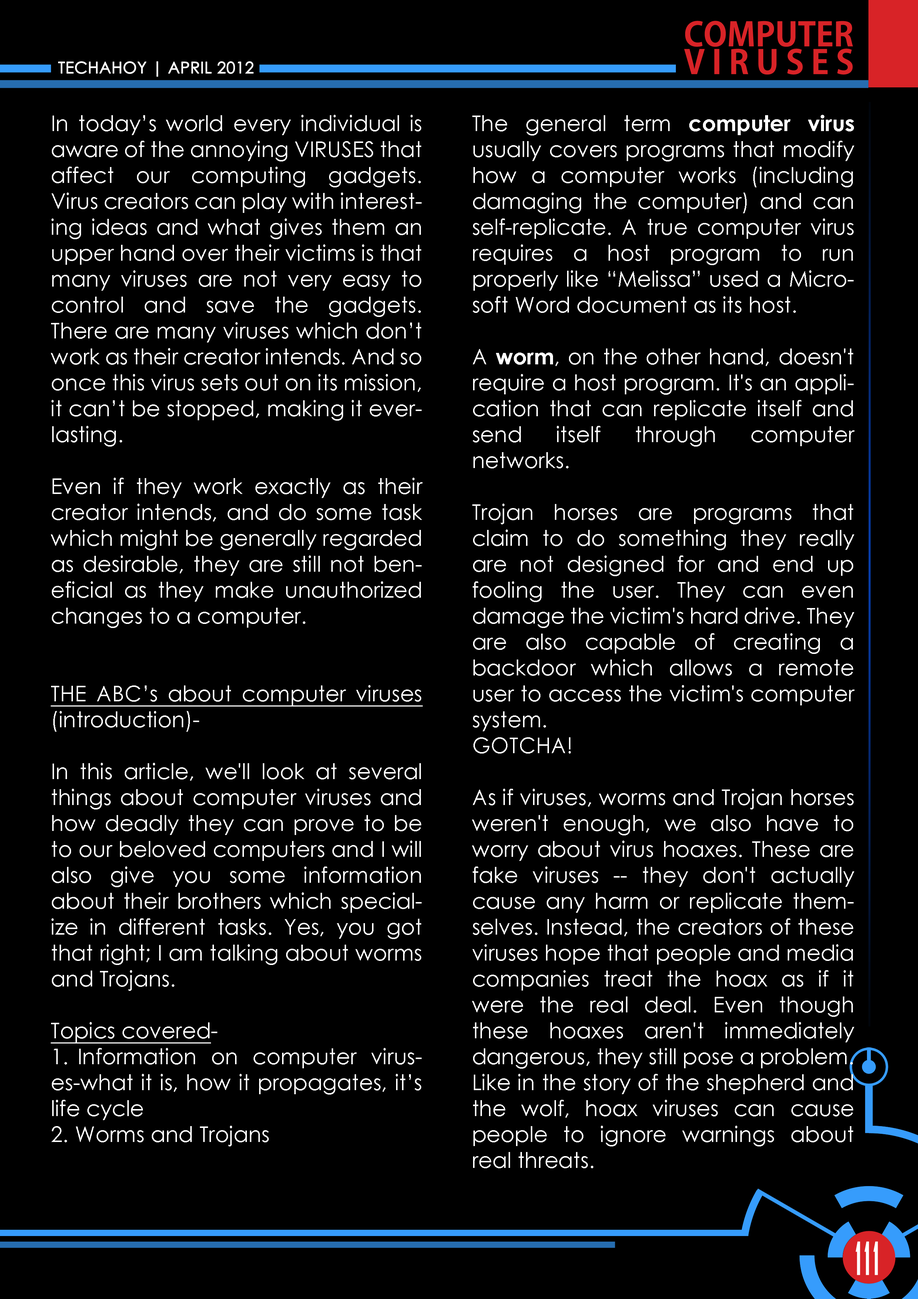
<style>
.page{position:relative;width:918px;height:1299px;background:#000000}
.page>*{position:absolute;margin:0}
.t1{font:32.6px/27.8px "AdobeGothicStd-Bold";color:#d82327;text-transform:uppercase}
.t2{font:32.6px/27.8px "AdobeGothicStd-Bold";letter-spacing:0.22em;color:#d82327;text-transform:uppercase}
.t3{font:16px "CenturyGothic";color:#ffffff;text-transform:uppercase;font-weight:bold}
.t4{font:21.6px "CenturyGothic";color:#ffffff}
.t5{font:21.6px "CenturyGothic";color:#ffffff;text-decoration:underline}
.t6{font:21.6px "CenturyGothic-Bold";color:#ffffff}
.t7{font:43.7px "AgencyFB-Reg";color:#ffffff;text-transform:uppercase}
</style>
<div class="page">
<p class="t1" style="left:684px;top:21px;width:169px;height:54px">Computer <br><span class="t2">Viruses</span></p>
<p class="t3" style="left:58px;top:61px;width:196px;height:16px">techahoy | APRIL 2012</p>
<p class="t4" style="left:51px;top:115px;width:372px;height:1031px;text-align:justify">In today’s world every individual is aware of the annoying VIRUSES that affect our computing gadgets. Virus creators can play with interesting ideas and what gives them an upper hand over their victims is that many viruses are not very easy to control and save the gadgets. There are many viruses which don’t work as their creator intends. And so once this virus sets out on its mission, it can’t be stopped, making it everlasting. <br><br>Even if they work exactly as their creator intends, and do some task which might be generally regarded as desirable, they are still not beneficial as they make unauthorized changes to a computer.<br><br><br><span class="t5">THE ABC’s about computer viruses </span>(introduction)-<br><br>In this article, we'll look at several things about computer viruses and how deadly they can prove to be to our beloved computers and I will also give you some information about their brothers which specialize in different tasks. Yes, you got that right; I am talking about worms and Trojans.<br><br><span class="t5">Topics covered</span>- <br>1. Information on computer viruses-what it is, how it propagates, it’s life cycle<br>2. Worms and Trojans</p>
<p class="t4" style="left:472px;top:115px;width:383px;height:1053px;text-align:justify">The general term <span class="t6">computer virus</span> usually covers programs that modify how a computer works (including damaging the computer) and can self-replicate. A true computer virus requires a host program to run properly like “Melissa” used a Microsoft Word document as its host. <br><br>A <span class="t6">worm</span>, on the other hand, doesn't require a host program. It's an application that can replicate itself and send itself through computer networks.<br><br>Trojan horses are programs that claim to do something they really are not designed for and end up fooling the user. They can even damage the victim's hard drive. They are also capable of creating a backdoor which allows a remote user to access the victim's computer system.<br>GOTCHA!<br><br>As if viruses, worms and Trojan horses weren't enough, we also have to worry about virus hoaxes. These are fake viruses -- they don't actually cause any harm or replicate themselves. Instead, the creators of these viruses hope that people and media companies treat the hoax as if it were the real deal. Even though these hoaxes aren't immediately dangerous, they still pose a problem. Like in the story of the shepherd and the wolf, hoax viruses can cause people to ignore warnings about real threats.</p>
<p class="t7" style="left:856px;top:1241px;width:22px;height:34px">111</p>
</div>
